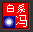
<style>
.page{position:relative;width:33px;height:32px;background:#f20000}
.page>*{position:absolute;margin:0}
.t1{font:10.4px "SimSun";color:#ffffff}
.t2{font:11.7px "SimSun";color:#ffffff}
</style>
<div class="page">
<p class="t1" style="left:7px;top:4px;width:18px;height:9px">白系</p>
<p class="t2" style="left:16px;top:15px;width:11px;height:12px">冯</p>
</div>
